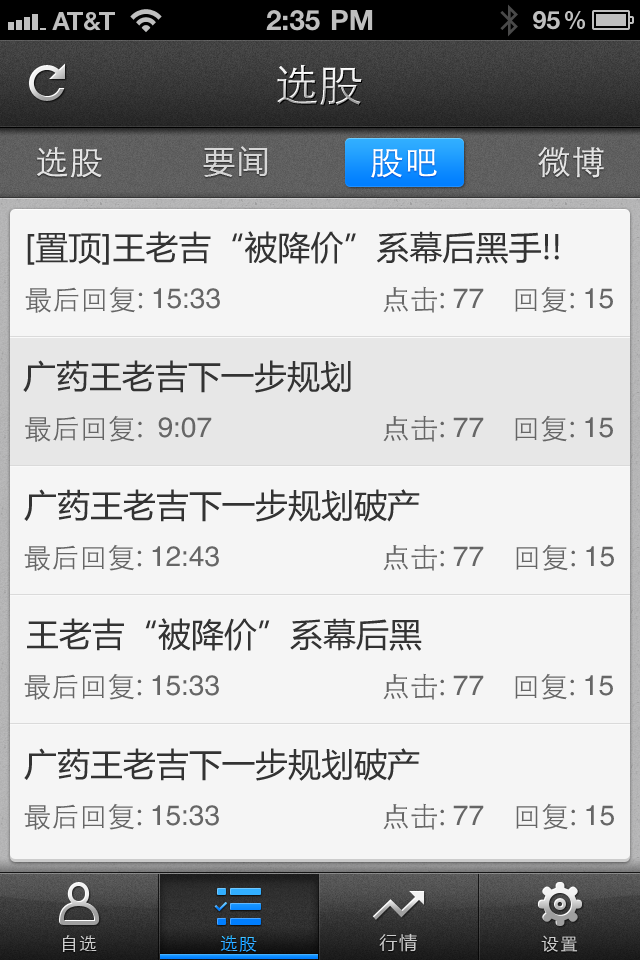
<style>
.page{position:relative;width:640px;height:960px;background:#f5f5f5}
.page>*{position:absolute;margin:0}
.t1{font:44px "STXihei";letter-spacing:0.005em}
.t2{font:33px "STXihei";letter-spacing:0.05em;color:#e3e3e3}
.t3{font:32px "MicrosoftYaHei";letter-spacing:0.05em;color:#d6d6d6}
.t4{font:33px "STXihei";letter-spacing:0.05em;color:#ffffff}
.t5{font:33px "MicrosoftYaHei";color:#333333}
.t6{font:28px "STXihei";color:#666666}
.t7{font:28px "HelveticaCE-Regular";color:#666666}
.t8{font:28px "HelveticaCE-Regular";color:#1e64ab}
.t9{font:18px "STXihei";letter-spacing:0.05em;color:#cccccc}
.t10{font:18px "STXihei";letter-spacing:0.05em}
.t11{font:18px "MicrosoftYaHei";letter-spacing:0.1em;color:#cccccc}
</style>
<div class="page">
<p class="t1" style="left:277px;top:64px;width:85px;height:42px">选股</p>
<p class="t2" style="left:37px;top:147px;width:65px;height:31px">选股</p>
<p class="t3" style="left:203px;top:146px;width:65px;height:31px">要闻</p>
<p class="t4" style="left:371px;top:149px;width:66px;height:29px">股吧</p>
<p class="t2" style="left:538px;top:146px;width:66px;height:32px">微博</p>
<p class="t5" style="left:27px;top:231px;width:532px;height:34px">[置顶]王老吉“被降价”系幕后黑手!!</p>
<p class="t6" style="left:25px;top:286px;width:195px;height:27px">最后回复: <span class="t7">15:33</span></p>
<p class="t6" style="left:383px;top:286px;width:101px;height:27px">点击: <span class="t8">77</span></p>
<p class="t6" style="left:515px;top:286px;width:98px;height:27px">回复: <span class="t8">15</span></p>
<p class="t5" style="left:23px;top:360px;width:328px;height:33px">广药王老吉下一步规划</p>
<p class="t6" style="left:25px;top:415px;width:187px;height:27px">最后回复:  <span class="t7">9:07</span></p>
<p class="t6" style="left:383px;top:415px;width:101px;height:27px">点击: <span class="t8">77</span></p>
<p class="t6" style="left:515px;top:415px;width:98px;height:27px">回复: <span class="t8">15</span></p>
<p class="t5" style="left:24px;top:489px;width:396px;height:33px">广药王老吉下一步规划破产</p>
<p class="t6" style="left:24px;top:544px;width:195px;height:27px">最后回复: <span class="t7">12:43</span></p>
<p class="t6" style="left:383px;top:544px;width:101px;height:27px">点击: <span class="t8">77</span></p>
<p class="t6" style="left:516px;top:544px;width:98px;height:27px">回复: <span class="t8">15</span></p>
<p class="t5" style="left:27px;top:618px;width:395px;height:33px">王老吉“被降价”系幕后黑</p>
<p class="t6" style="left:24px;top:673px;width:195px;height:27px">最后回复: <span class="t7">15:33</span></p>
<p class="t6" style="left:383px;top:673px;width:101px;height:27px">点击: <span class="t8">77</span></p>
<p class="t6" style="left:515px;top:673px;width:98px;height:27px">回复: <span class="t8">15</span></p>
<p class="t5" style="left:24px;top:748px;width:396px;height:33px">广药王老吉下一步规划破产</p>
<p class="t6" style="left:24px;top:803px;width:195px;height:27px">最后回复: <span class="t7">15:33</span></p>
<p class="t6" style="left:383px;top:803px;width:101px;height:27px">点击: <span class="t8">77</span></p>
<p class="t6" style="left:516px;top:803px;width:98px;height:27px">回复: <span class="t8">15</span></p>
<p class="t9" style="left:62px;top:935px;width:35px;height:17px">自选</p>
<p class="t10" style="left:220px;top:935px;width:37px;height:17px">选股</p>
<p class="t11" style="left:379px;top:933px;width:38px;height:19px">行情</p>
<p class="t9" style="left:541px;top:935px;width:37px;height:17px">设置</p>
</div>
